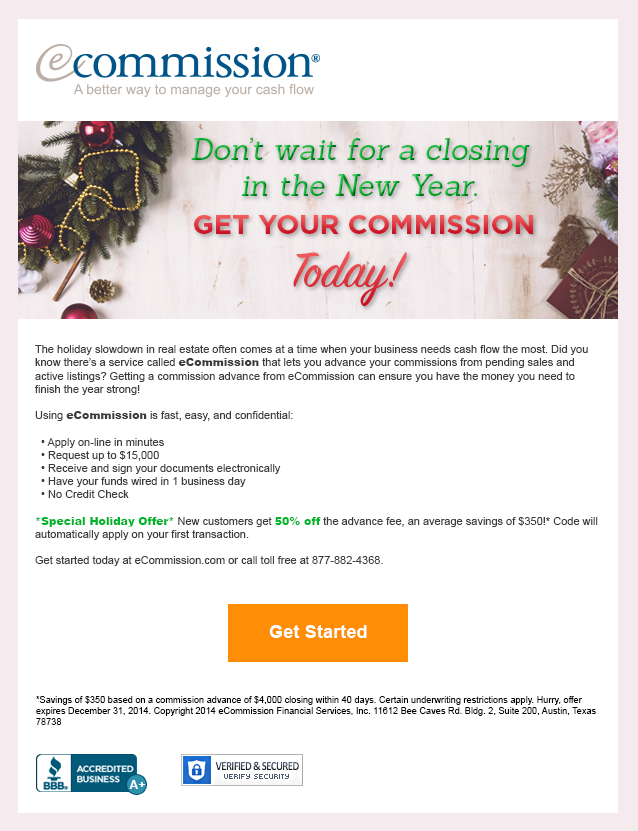
<style>
.page{position:relative;width:638px;height:831px;background:#ffffff}
.page>*{position:absolute;margin:0}
.t1{font:33.5px "Sanchez-RegularItalic"}
.t2{font:29.8px "Gotham-Bold";text-transform:uppercase}
.t3{font:59.2px "SignPainter-HouseScript";color:#e13d45}
.t4{font:12px "ArialMT";color:#3c3c3c}
.t5{font:12px "Arial-Black";color:#3c3c3c}
.t6{font:12px "Arial-Black";color:#00b42a}
.t7{font:18.3px "Arial-BoldMT";color:#ffffff}
.t8{font:9.2px "ArialMT";color:#000000}
</style>
<div class="page">
<p class="t1" style="left:191px;top:137px;width:339px;height:59px;text-align:center">Don’t wait for a closing<br>in the New Year.</p>
<p class="t2" style="left:194px;top:215px;width:339px;height:19px">Get your commission</p>
<p class="t3" style="left:293px;top:251px;width:114px;height:56px">Today!</p>
<p class="t4" style="left:35px;top:345px;width:563px;height:221px">The holiday slowdown in real estate often comes at a time when your business needs cash flow the most. Did you know there’s a service called <span class="t5">eCommission</span> that lets you advance your commissions from pending sales and active listings? Getting a commission advance from eCommission can ensure you have the money you need to finish the year strong!<br><br>Using <span class="t5">eCommission</span> is fast, easy, and confidential:<br><br>  • Apply on-line in minutes<br>  • Request up to $15,000<br>  • Receive and sign your documents electronically<br>  • Have your funds wired in 1 business day<br>  • No Credit Check<br><br><span class="t6">*Special Holiday Offer* </span>New customers get <span class="t6">50% off</span> the advance fee, an average savings of $350!* Code will automatically apply on your first transaction. <br><br>Get started today at eCommission.com or call toll free at 877-882-4368.</p>
<p class="t7" style="left:269px;top:625px;width:98px;height:13px">Get Started</p>
<p class="t8" style="left:36px;top:696px;width:560px;height:29px">*Savings of $350 based on a commission advance of $4,000 closing within 40 days. Certain underwriting restrictions apply. Hurry, offer expires December 31, 2014. Copyright 2014 eCommission Financial Services, Inc. 11612 Bee Caves Rd. Bldg. 2, Suite 200, Austin, Texas 78738</p>
</div>
